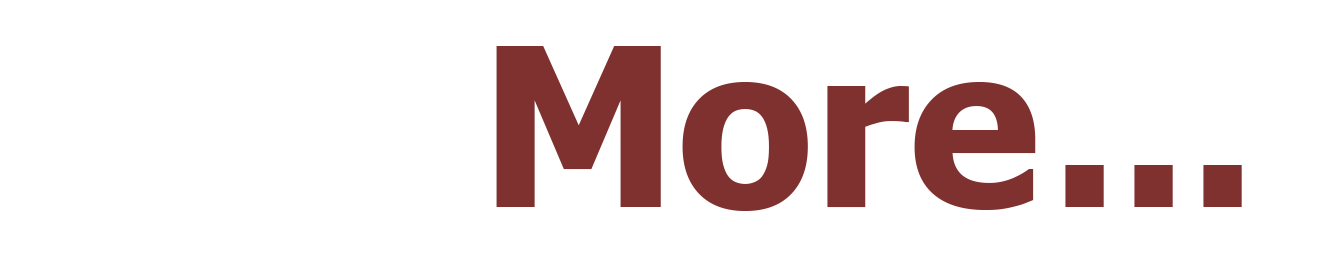
<style>
.page{position:relative;width:1334px;height:256px;background:#ffffff}
.page>*{position:absolute;margin:0}
.t1{font:220.6px "Tahoma-Bold";color:#7f312f}
</style>
<div class="page">
<p class="t1" style="left:496px;top:46px;width:746px;height:165px">More ...</p>
</div>
